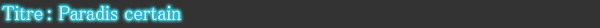
<style>
.page{position:relative;width:600px;height:28px;background:#333333}
.page>*{position:absolute;margin:0}
.t1{font:20px "MS-PMincho";color:#ffffff}
</style>
<div class="page">
<p class="t1" style="left:2px;top:6px;width:179px;height:15px">Titre : Paradis certain</p>
</div>
